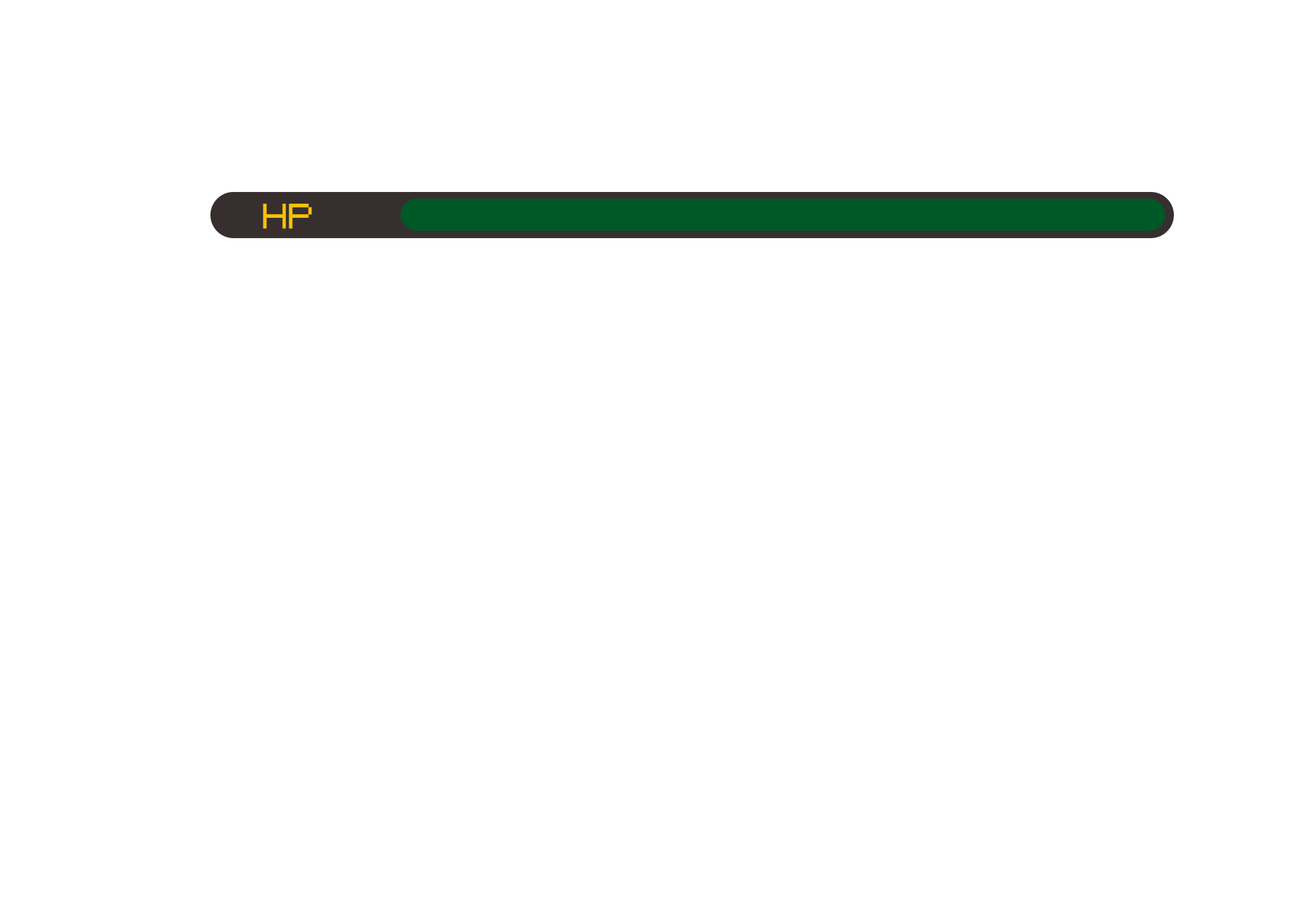
<style>
.page{position:relative;width:1292px;height:923px;background:#ffffff}
.page>*{position:absolute;margin:0}
.t1{font:28px "PokemonGB";color:#f6c10a;scale:0.91 1}
</style>
<div class="page">
<p class="t1" style="left:263px;top:204px;width:49px;height:25px">HP</p>
</div>
